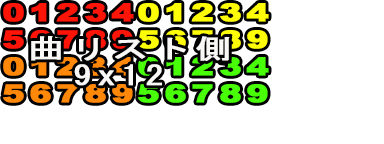
<style>
.page{position:relative;width:384px;height:144px;background:#ffffff}
.page>*{position:absolute;margin:0}
.t1{font:24.8px/27px "Arial-Black";letter-spacing:0.135em;color:#ff1408;font-weight:bold;scale:1.33 1}
.t2{font:24.8px/27px "Arial-Black";letter-spacing:0.135em;color:#fffc08;font-weight:bold;scale:1.33 1}
.t3{font:27px/27px "MS-Gothic";letter-spacing:0.135em;color:#faf8f6;font-weight:bold;scale:1.33 1}
.t4{font:24.8px/27px "Arial-Black";letter-spacing:0.135em;color:#ff8808;font-weight:bold;scale:1.33 1}
.t5{font:24.8px/27px "Arial-Black";letter-spacing:0.135em;color:#48ff08;font-weight:bold;scale:1.33 1}
</style>
<div class="page">
<p class="t1" style="left:3px;top:3px;width:131px;height:46px">01234<br>56789</p>
<p class="t2" style="left:138px;top:3px;width:131px;height:46px">01234<br>56789</p>
<p class="t3" style="left:31px;top:36px;width:199px;height:50px;text-align:center">曲リスト側<br>9x12</p>
<p class="t4" style="left:3px;top:57px;width:131px;height:46px">01234<br>56789</p>
<p class="t5" style="left:138px;top:57px;width:131px;height:46px">01234<br>56789</p>
</div>
